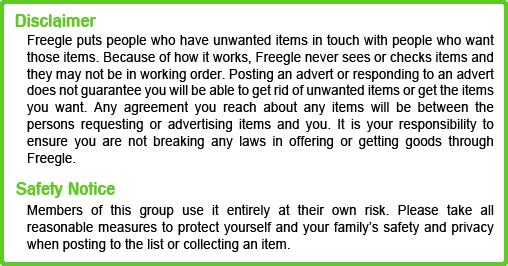
<style>
.page{position:relative;width:508px;height:266px;background:#ffffff}
.page>*{position:absolute;margin:0}
.t1{font:18px "Mesmer";color:#5eca24}
.t2{font:14px "ArialMT";color:#000000;scale:0.96 1}
</style>
<div class="page">
<p class="t1" style="left:15px;top:14px;width:81px;height:14px">Disclaimer</p>
<p class="t2" style="left:27px;top:34px;width:467px;height:132px;text-align:justify">Freegle puts people who have unwanted items in touch with people who want those items. Because of how it works, Freegle never sees or checks items and they may not be in working order. Posting an advert or responding to an advert does not guarantee you will be able to get rid of unwanted items or get the items you want. Any agreement you reach about any items will be between the persons requesting or advertising items and you. It is your responsibility to ensure you are not breaking any laws in offering or getting goods through Freegle.</p>
<p class="t1" style="left:16px;top:182px;width:99px;height:16px">Safety Notice</p>
<p class="t2" style="left:27px;top:204px;width:467px;height:48px;text-align:justify">Members of this group use it entirely at their own risk. Please take all reasonable measures to protect yourself and your family’s safety and privacy when posting to the list or collecting an item.</p>
</div>
